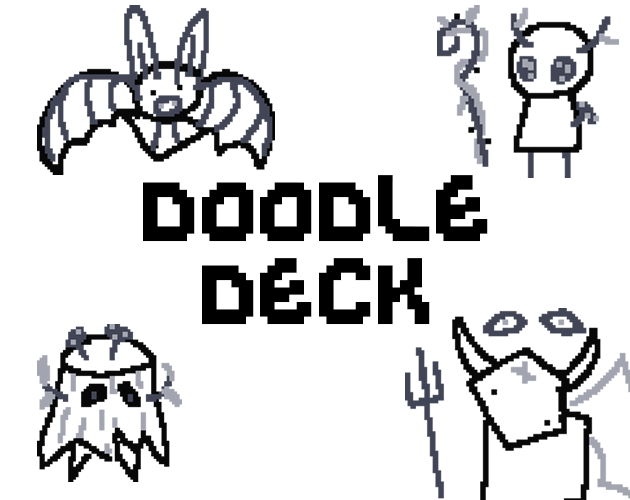
<style>
.page{position:relative;width:630px;height:500px;background:#ffffff}
.page>*{position:absolute;margin:0}
.t1{font:117.2px/83.3px "AweMonoGold";color:#000000}
</style>
<div class="page">
<p class="t1" style="left:143px;top:175px;width:345px;height:150px;text-align:center">DOODLE<br>DECK</p>
</div>
